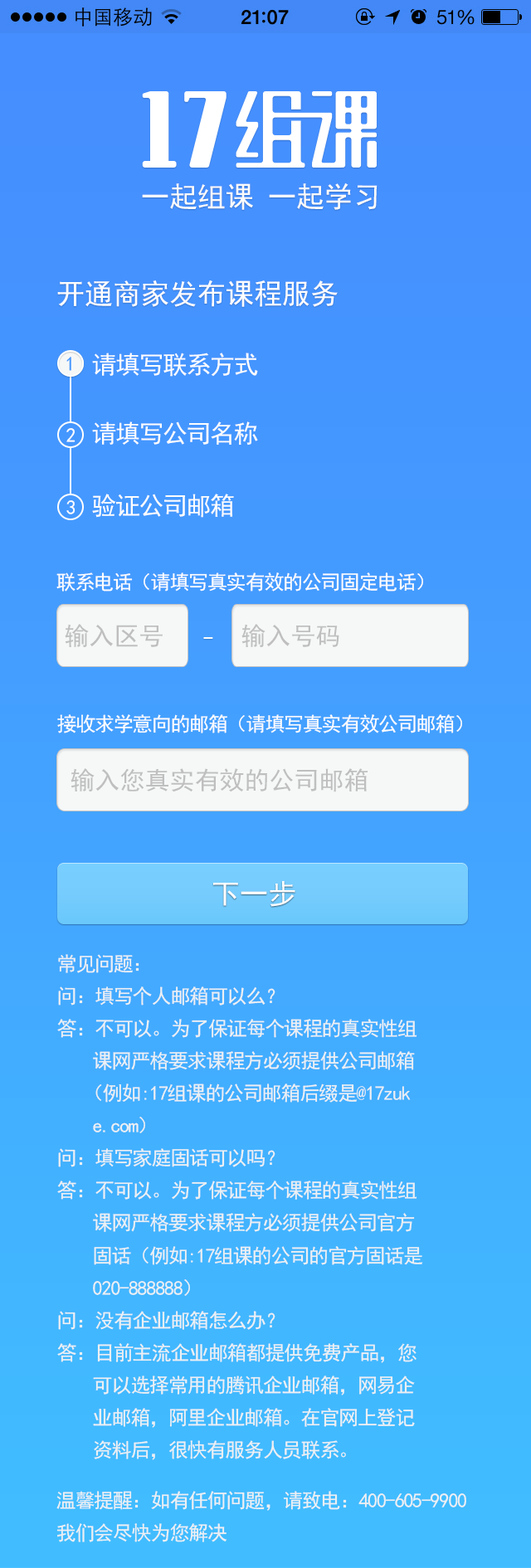
<style>
.page{position:relative;width:531px;height:1568px}
.page>*{position:absolute;margin:0}
.t1{font:28.2px "SimHei";color:#fbfbfb}
.t2{font:28.2px "SimHei";color:#fefefe}
.t3{font:24.9px "SimHei";letter-spacing:-0.05em;color:#fefefe}
.t4{font:19.9px "SimHei";color:#4499ff}
.t5{font:19.9px "SimHei";color:#ffffff}
.t6{font:19.9px "SimHei";letter-spacing:-0.05em;color:#fefefe}
.t7{font:24.9px "SimHei";color:#bfbfbf}
.t8{font:19.9px "MicrosoftYaHei";color:#fefefe}
.t9{font:19.9px "SimHei";letter-spacing:-0.05em;color:#edf0f3}
</style>
<div class="page">
<p class="t1" style="left:142px;top:183px;width:235px;height:27px">一起组课 一起学习</p>
<p class="t2" style="left:57px;top:280px;width:281px;height:27px">开通商家发布课程服务</p>
<p class="t3" style="left:92px;top:353px;width:166px;height:24px">请填写联系方式</p>
<p class="t4" style="left:66px;top:357px;width:5px;height:14px">1</p>
<p class="t3" style="left:92px;top:421px;width:166px;height:25px">请填写公司名称</p>
<p class="t5" style="left:66px;top:428px;width:9px;height:14px">2</p>
<p class="t3" style="left:92px;top:494px;width:142px;height:24px">验证公司邮箱</p>
<p class="t5" style="left:66px;top:500px;width:9px;height:14px">3</p>
<p class="t6" style="left:56px;top:572px;width:367px;height:20px">联系电话（请填写真实有效的公司固定电话）</p>
<p class="t7" style="left:65px;top:624px;width:98px;height:24px">输入区号</p>
<p class="t7" style="left:241px;top:624px;width:98px;height:24px">输入号码</p>
<p class="t8" style="left:203px;top:637px;width:10px;height:2px">_</p>
<p class="t6" style="left:57px;top:714px;width:405px;height:19px">接收求学意向的邮箱（请填写真实有效公司邮箱）</p>
<p class="t7" style="left:71px;top:768px;width:297px;height:24px">输入您真实有效的公司邮箱</p>
<p class="t2" style="left:213px;top:881px;width:82px;height:26px">下一步</p>
<p class="t9" style="left:57px;top:954px;width:366px;height:506px">常见问题：<br>问：填写个人邮箱可以么？<br>答：不可以。为了保证每个课程的真实性组<br>    课网严格要求课程方必须提供公司邮箱<br>   （例如:17组课的公司邮箱后缀是@17zuk<br>    e.com）<br>问：填写家庭固话可以吗？<br>答：不可以。为了保证每个课程的真实性组<br>    课网严格要求课程方必须提供公司官方<br>    固话（例如:17组课的公司的官方固话是<br>    020-888888）<br>问：没有企业邮箱怎么办？<br>答：目前主流企业邮箱都提供免费产品，您<br>    可以选择常用的腾讯企业邮箱，网易企<br>    业邮箱，阿里企业邮箱。在官网上登记<br>    资料后，很快有服务人员联系。</p>
<p class="t9" style="left:56px;top:1491px;width:410px;height:51px">温馨提醒：如有任何问题，请致电：400-605-9900<br>我们会尽快为您解决</p>
</div>
